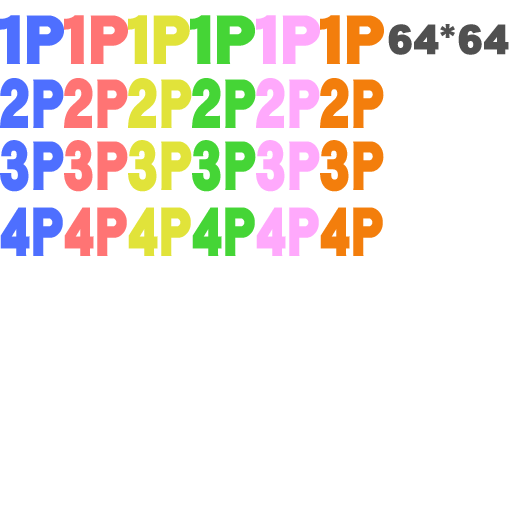
<style>
.page{position:relative;width:512px;height:512px;background:#ffffff}
.page>*{position:absolute;margin:0}
.t1{font:69px "DFGothic-UB-WING-RKSJ-H";color:#4e6fff}
.t2{font:69px "DFGothic-UB-WING-RKSJ-H";color:#ff7474}
.t3{font:69px "DFGothic-UB-WING-RKSJ-H";color:#e1e33a;scale:0.95 1}
.t4{font:69px "DFGothic-UB-WING-RKSJ-H";color:#45d536}
.t5{font:69px "DFGothic-UB-WING-RKSJ-H";color:#ffa9fc}
.t6{font:69px "DFGothic-UB-WING-RKSJ-H";color:#f37e0c}
.t7{font:42.1px "DHPGothic-EB-WIN-RKSJ-H";color:#505050}
.t8{font:69px "DFGothic-UB-WING-RKSJ-H";color:#4e6fff;scale:0.79 1}
.t9{font:69px "DFGothic-UB-WING-RKSJ-H";color:#ff7474;scale:0.79 1}
.t10{font:69px "DFGothic-UB-WING-RKSJ-H";color:#e1e33a;scale:0.79 1}
.t11{font:69px "DFGothic-UB-WING-RKSJ-H";color:#45d536;scale:0.79 1}
.t12{font:69px "DFGothic-UB-WING-RKSJ-H";color:#ffa9fc;scale:0.79 1}
.t13{font:69px "DFGothic-UB-WING-RKSJ-H";color:#f37e0c;scale:0.79 1}
.t14{font:69px "DFGothic-UB-WING-RKSJ-H";color:#4e6fff;scale:0.78 1}
.t15{font:69px "DFGothic-UB-WING-RKSJ-H";color:#ff7474;scale:0.78 1}
.t16{font:69px "DFGothic-UB-WING-RKSJ-H";color:#e1e33a;scale:0.78 1}
.t17{font:69px "DFGothic-UB-WING-RKSJ-H";color:#45d536;scale:0.78 1}
.t18{font:69px "DFGothic-UB-WING-RKSJ-H";color:#ffa9fc;scale:0.78 1}
.t19{font:69px "DFGothic-UB-WING-RKSJ-H";color:#f37e0c;scale:0.78 1}
</style>
<div class="page">
<p class="t1" style="left:0px;top:15px;width:64px;height:49px">１P</p>
<p class="t2" style="left:64px;top:15px;width:64px;height:49px">１P</p>
<p class="t3" style="left:128px;top:15px;width:62px;height:49px">１P</p>
<p class="t4" style="left:190px;top:15px;width:65px;height:49px">１P</p>
<p class="t5" style="left:256px;top:15px;width:64px;height:49px">１P</p>
<p class="t6" style="left:320px;top:15px;width:64px;height:49px">１P</p>
<p class="t7" style="left:388px;top:24px;width:121px;height:31px">64*64</p>
<p class="t8" style="left:0px;top:78px;width:64px;height:50px">2P</p>
<p class="t9" style="left:64px;top:78px;width:64px;height:50px">2P</p>
<p class="t10" style="left:128px;top:78px;width:64px;height:50px">2P</p>
<p class="t11" style="left:192px;top:78px;width:64px;height:50px">2P</p>
<p class="t12" style="left:256px;top:78px;width:64px;height:50px">2P</p>
<p class="t13" style="left:320px;top:78px;width:64px;height:50px">2P</p>
<p class="t8" style="left:0px;top:140px;width:64px;height:52px">3P</p>
<p class="t9" style="left:64px;top:140px;width:64px;height:52px">3P</p>
<p class="t10" style="left:128px;top:140px;width:64px;height:52px">3P</p>
<p class="t11" style="left:192px;top:140px;width:64px;height:52px">3P</p>
<p class="t12" style="left:256px;top:140px;width:64px;height:52px">3P</p>
<p class="t13" style="left:320px;top:140px;width:64px;height:52px">3P</p>
<p class="t14" style="left:0px;top:207px;width:63px;height:49px">4P</p>
<p class="t15" style="left:64px;top:207px;width:63px;height:49px">4P</p>
<p class="t16" style="left:128px;top:207px;width:63px;height:49px">4P</p>
<p class="t17" style="left:192px;top:207px;width:63px;height:49px">4P</p>
<p class="t18" style="left:256px;top:207px;width:63px;height:49px">4P</p>
<p class="t19" style="left:320px;top:207px;width:63px;height:49px">4P</p>
</div>
